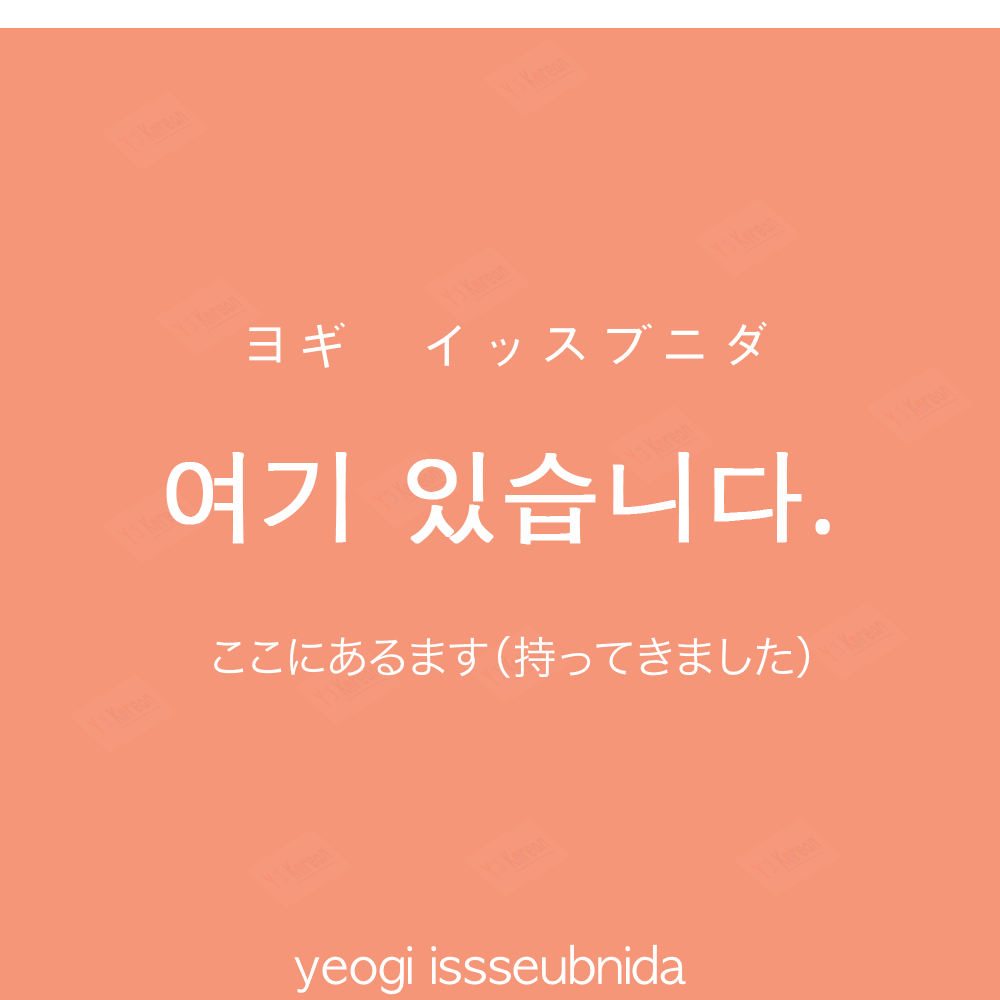
<style>
.page{position:relative;width:1000px;height:1000px;background:#f69679}
.page>*{position:absolute;margin:0}
.t1{font:60px "AppleGothic";color:#ffffff}
.t2{font:100px "AppleGothic";color:#ffffff;font-weight:bold}
.t3{font:45px "HiraKakuProN-W3";color:#ffffff}
.t4{font:50px "AppleGothic";color:#ffffff}
</style>
<div class="page">
<p class="t1" style="left:249px;top:321px;width:518px;height:47px">ヨギ　イッスブニダ</p>
<p class="t2" style="left:166px;top:452px;width:664px;height:93px">여기 있습니다.</p>
<p class="t3" style="left:214px;top:636px;width:596px;height:42px">ここにあるます（持ってきました）</p>
<p class="t4" style="left:294px;top:944px;width:392px;height:51px">yeogi issseubnida</p>
</div>
